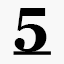
<style>
.page{position:relative;width:64px;height:64px;background:#f8f8f8}
.page>*{position:absolute;margin:0}
.t1{font:60px "Georgia-Bold";letter-spacing:0.025em;color:#000000;text-decoration:underline}
</style>
<div class="page">
<p class="t1" style="left:13px;top:8px;width:38px;height:47px">5</p>
</div>
